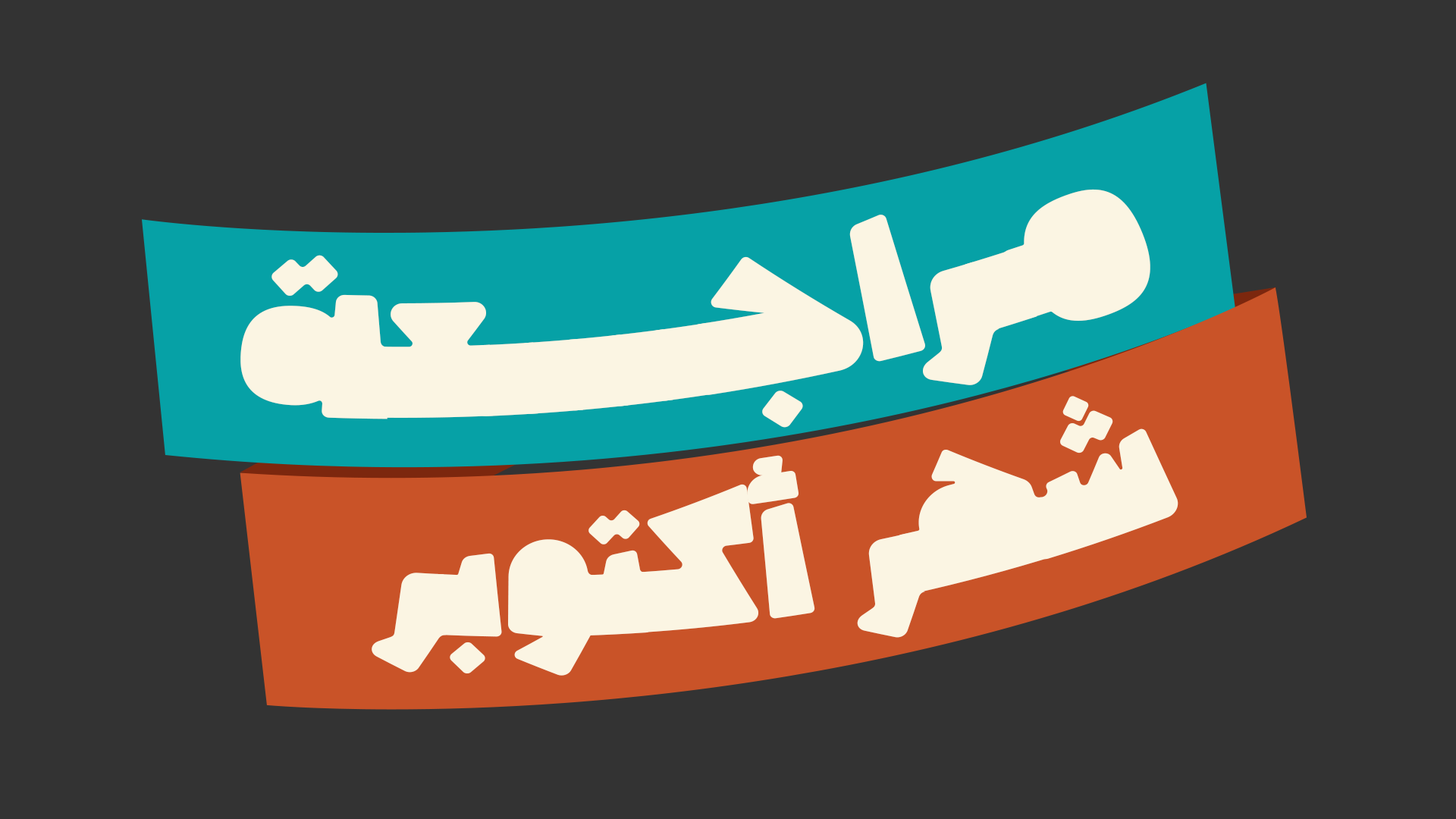
<style>
.page{position:relative;width:1456px;height:819px;background:#333333}
.page>*{position:absolute;margin:0}
.t1{font:193.6px "Cruuki-Black";color:#fbf5e3}
.t2{font:163.9px "Cruuki-Black";color:#fbf5e3}
</style>
<div class="page">
<p class="t1" style="left:240px;top:189px;width:910px;height:239px;rotate:-9deg">مـراجـــــعة</p>
<p class="t2" style="left:372px;top:396px;width:806px;height:280px;rotate:-8deg">شهر أكتوبر</p>
</div>
